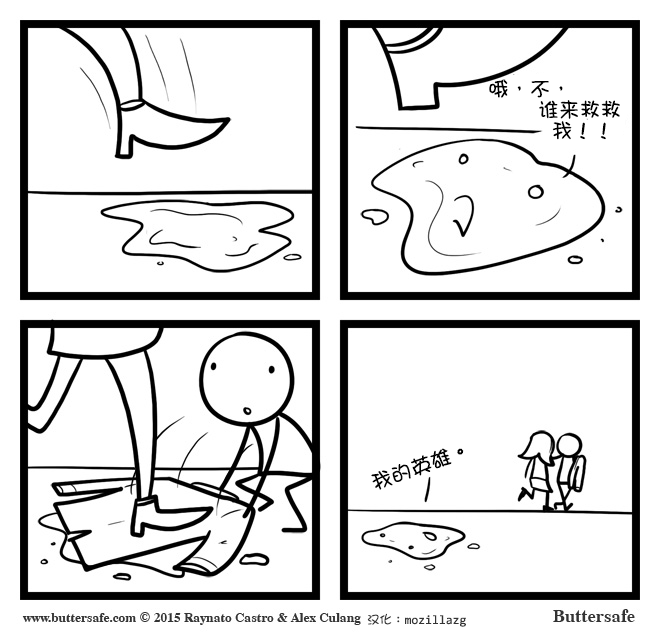
<style>
.page{position:relative;width:660px;height:640px;background:#ffffff}
.page>*{position:absolute;margin:0}
.t1{font:20.8px "DFGirl";color:#000000}
.t2{font:20.8px/20.8px "DFGirl";color:#000000}
.t3{font:12.5px "YaHei-Consolas-Hybrid";color:#343434}
.t4{font:12.5px "DFGirl";color:#343434}
</style>
<div class="page">
<p class="t1" style="left:489px;top:79px;width:74px;height:19px">哦，不，</p>
<p class="t2" style="left:539px;top:100px;width:81px;height:40px">谁来救救<br>  我！！</p>
<p class="t1" style="left:371px;top:448px;width:93px;height:42px;rotate:-20deg">我的英雄。</p>
<p class="t3" style="left:367px;top:613px;width:99px;height:14px"><span class="t4">汉化：</span>mozillazg</p>
</div>
